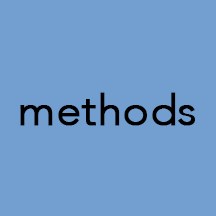
<style>
.page{position:relative;width:216px;height:216px;background:#729fcf}
.page>*{position:absolute;margin:0}
.t1{font:43.8px "Avenir-Light";color:#000000;font-weight:bold}
</style>
<div class="page">
<p class="t1" style="left:20px;top:92px;width:175px;height:34px">methods</p>
</div>
